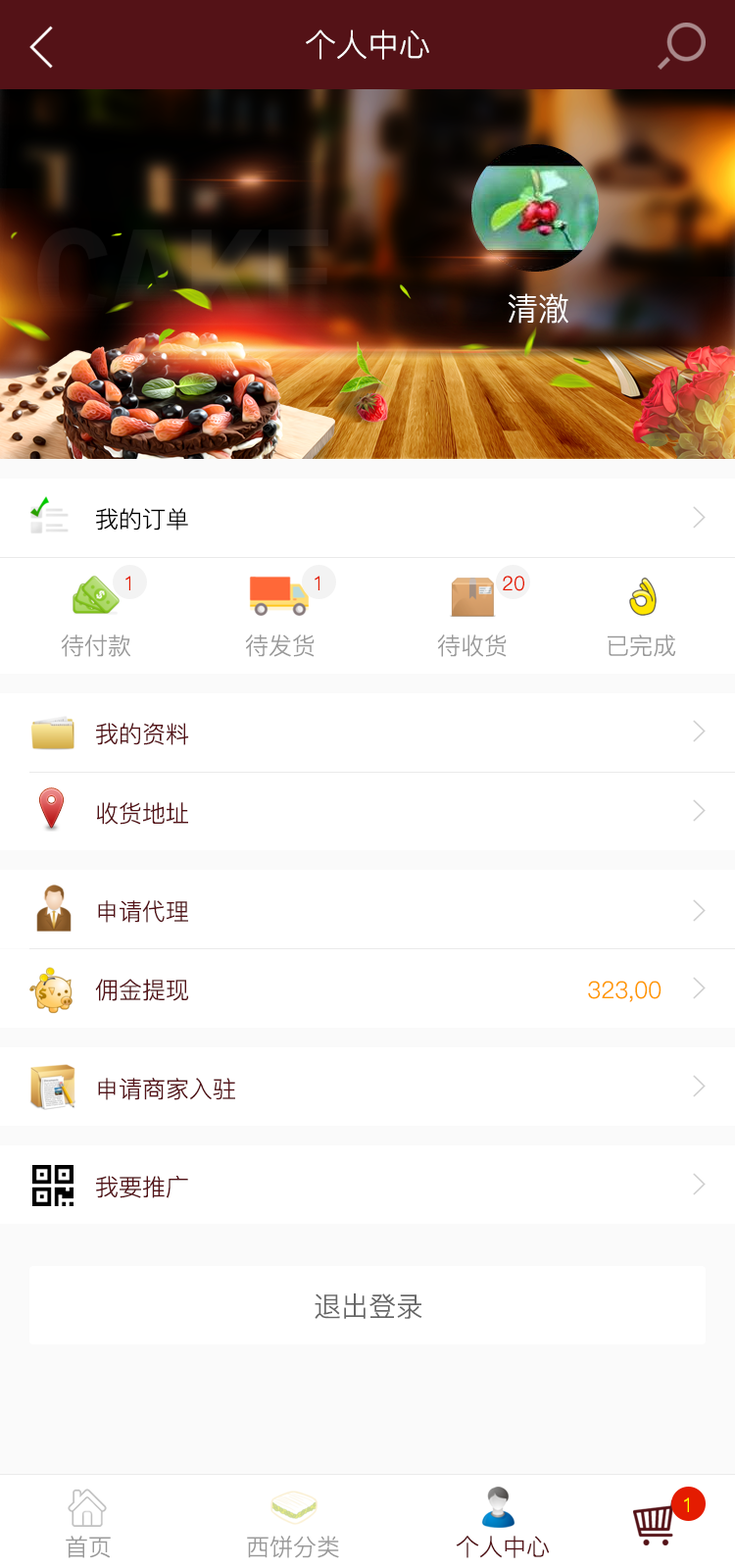
<style>
.page{position:relative;width:735px;height:1568px;background:#ffffff}
.page>*{position:absolute;margin:0}
.t1{font:31.4px "PingFang-SC-Regular";color:#ffffff}
.t2{font:23.5px "PingFang-SC-Regular";color:#000000}
.t3{font:19.6px "PingFang-SC-Regular";color:#e41c01}
.t4{font:23.5px "PingFang-SC-Regular";color:#999999}
.t5{font:23.5px "PingFang-SC-Regular";color:#541217}
.t6{font:23.5px "PingFang-SC-Regular";color:#ff9900}
.t7{font:27.5px "PingFang-SC-Regular";color:#666666}
.t8{font:19.6px "PingFang-SC-Regular";color:#ffff00}
</style>
<div class="page">
<p class="t1" style="left:306px;top:29px;width:124px;height:31px">个人中心</p>
<p class="t1" style="left:508px;top:293px;width:61px;height:31px">清澈</p>
<p class="t2" style="left:96px;top:508px;width:92px;height:23px">我的订单</p>
<p class="t3" style="left:126px;top:576px;width:4px;height:14px">1</p>
<p class="t3" style="left:315px;top:576px;width:5px;height:14px">1</p>
<p class="t3" style="left:503px;top:576px;width:22px;height:15px">20</p>
<p class="t4" style="left:61px;top:634px;width:69px;height:23px">待付款</p>
<p class="t4" style="left:245px;top:634px;width:70px;height:23px">待发货</p>
<p class="t4" style="left:437px;top:634px;width:70px;height:23px">待收货</p>
<p class="t4" style="left:608px;top:634px;width:69px;height:23px">已完成</p>
<p class="t5" style="left:96px;top:723px;width:93px;height:22px">我的资料</p>
<p class="t5" style="left:97px;top:802px;width:91px;height:23px">收货地址</p>
<p class="t5" style="left:98px;top:900px;width:90px;height:23px">申请代理</p>
<p class="t5" style="left:95px;top:979px;width:93px;height:22px">佣金提现</p>
<p class="t6" style="left:588px;top:981px;width:74px;height:21px">323,00</p>
<p class="t5" style="left:98px;top:1078px;width:137px;height:22px">申请商家入驻</p>
<p class="t5" style="left:96px;top:1176px;width:92px;height:22px">我要推广</p>
<p class="t7" style="left:315px;top:1293px;width:108px;height:26px">退出登录</p>
<p class="t8" style="left:684px;top:1497px;width:5px;height:15px">1</p>
<p class="t4" style="left:66px;top:1536px;width:45px;height:22px">首页</p>
<p class="t4" style="left:247px;top:1536px;width:92px;height:22px">西饼分类</p>
<p class="t5" style="left:456px;top:1536px;width:94px;height:22px">个人中心</p>
</div>
